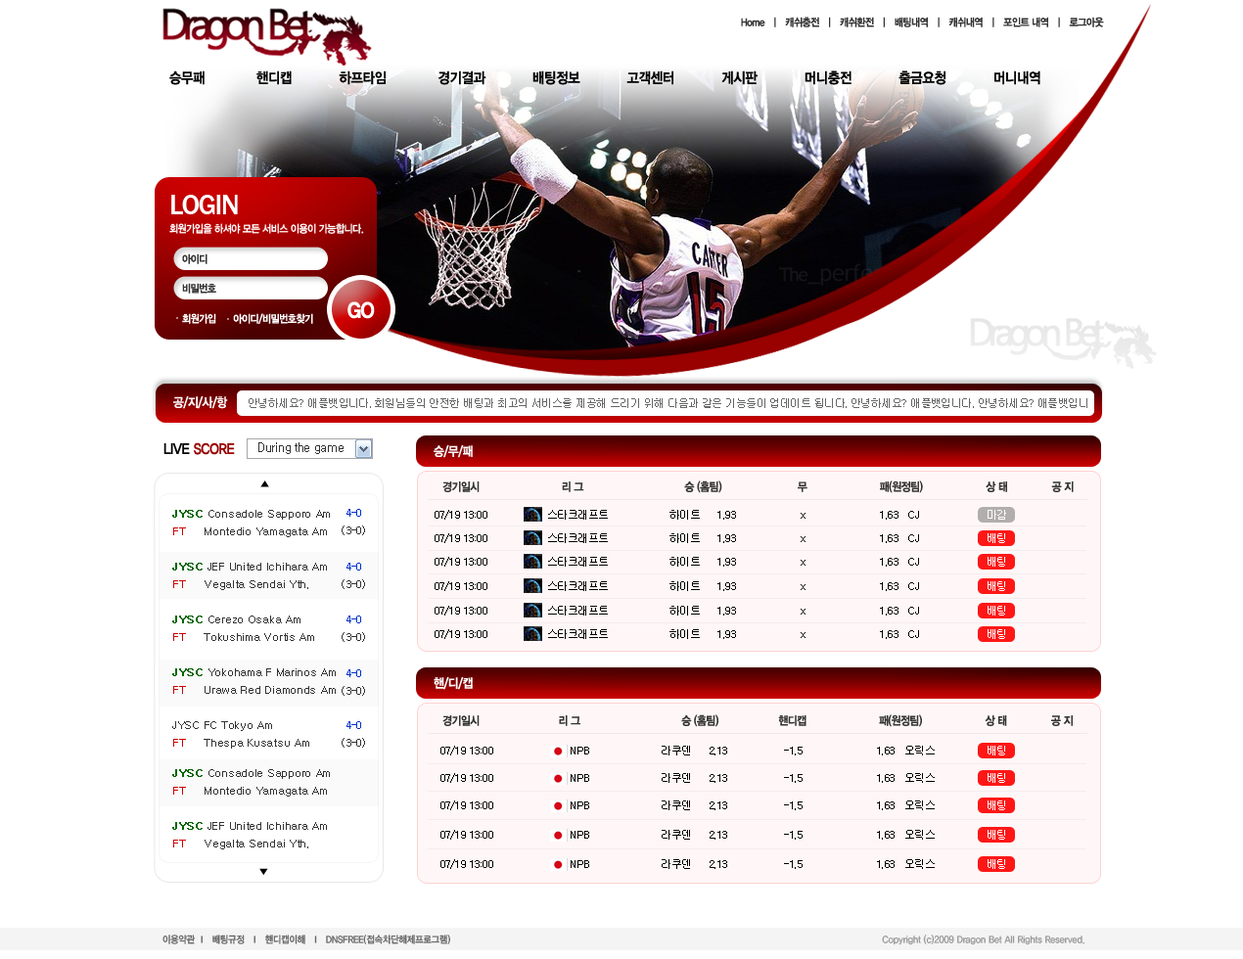
<style>
.page{position:relative;width:1243px;height:959px;background:#ffffff}
.page>*{position:absolute;margin:0}
.t1{font:10.8px "YDIYGO340";letter-spacing:-0.05em;color:#333333;scale:0.9 1}
.t2{font:14.7px "YDIYGO340";letter-spacing:-0.025em;color:#000000;scale:0.9 1}
.t3{font:28.2px "FranklinGothic-Medium";letter-spacing:-0.05em;color:#ffffff}
.t4{font:10.8px "YDIYGO340";letter-spacing:-0.05em;color:#ffffff;scale:0.9 1}
.t5{font:10.8px/29.4px "YDIYGO340";letter-spacing:-0.05em;color:#333333;scale:0.9 1}
.t6{font:21px "YDIYGO360";letter-spacing:-0.05em;color:#ffffff;scale:0.9 1}
.t7{font:12.7px "YDIYGO340";letter-spacing:-0.05em;color:#ffffff;scale:0.9 1}
.t8{font:10.8px "Gulim";letter-spacing:-0.05em;color:#666666}
.t9{font:14.7px "YDIYGO340";letter-spacing:-0.025em;color:#990000;scale:0.9 1}
.t10{font:11.7px "Gulim";letter-spacing:-0.025em;color:#333333}
.t11{font:11.7px "YDIYGO340";letter-spacing:-0.05em;color:#333333;scale:0.9 1}
.t12{font:10.8px/17.6px "Gulim";letter-spacing:-0.025em;color:#333333}
.t13{font:10.8px/17.6px "Gulim";letter-spacing:-0.025em;color:#006600;font-weight:bold}
.t14{font:10.8px/17.6px "Gulim";letter-spacing:-0.025em;color:#cc0000}
.t15{font:10.8px/17.6px "Gulim";letter-spacing:-0.025em;color:#0033cc}
.t16{font:10.8px "Gulim";letter-spacing:-0.05em;color:#000000}
.t17{font:10.8px "Gulim";letter-spacing:-0.05em;color:#ffffff}
.t18{font:9.8px "YDIYGO330";color:#666666;scale:0.9 1}
.t19{font:9.8px "YDIYGO330";color:#999999;scale:0.9 1}
</style>
<div class="page">
<p class="t1" style="left:741px;top:17px;width:363px;height:10px">Home  ㅣ  캐쉬충전  ㅣ  캐쉬환전  ㅣ  배팅내역  ㅣ  캐쉬내역  ㅣ  포인트 내역  ㅣ  로그아웃</p>
<p class="t2" style="left:169px;top:70px;width:871px;height:15px">승무패            핸디캡           하프타임            경기결과           배팅정보           고객센터           게시판           머니충전           출금요청           머니내역</p>
<p class="t3" style="left:171px;top:195px;width:67px;height:19px">LOGIN</p>
<p class="t4" style="left:169px;top:223px;width:195px;height:11px">회원가입을 하셔야 모든 서비스 이용이 가능합니다.</p>
<p class="t5" style="left:182px;top:254px;width:34px;height:40px">아이디<br>비밀번호</p>
<p class="t6" style="left:347px;top:301px;width:28px;height:18px">GO</p>
<p class="t4" style="left:182px;top:313px;width:131px;height:11px">회원가입      아이디/비밀번호찾기</p>
<p class="t7" style="left:173px;top:396px;width:55px;height:13px">공/지/사/항</p>
<p class="t8" style="left:249px;top:398px;width:838px;height:10px">안녕하세요? 애플뱃입니다. 회원님들의 안전한 배팅과 최고의 서비스를 제공해 드리기 위해 다음과 같은 기능들이 업데이트 됩니다. 안녕하세요? 애플뱃입니다. 안녕하세요? 애플뱃입니</p>
<p class="t9" style="left:163px;top:442px;width:72px;height:13px"><span class="t2">LIVE </span>SCORE</p>
<p class="t10" style="left:258px;top:442px;width:86px;height:12px">During the game</p>
<p class="t7" style="left:434px;top:445px;width:39px;height:13px">승/무/패</p>
<p class="t11" style="left:442px;top:481px;width:632px;height:12px">경기일시                          리 그                                승 (홈팀)                        무                       패(원정팀)                    상 태              공 지</p>
<p class="t12" style="left:172px;top:510px;width:164px;height:239px"><span class="t13">JYSC</span> Consadole Sapporo Am  <br><span class="t14">FT</span>     Montedio Yamagata Am <br><br><span class="t13">JYSC</span> JEF United Ichihara Am <br><span class="t14">FT</span>     Vegalta Sendai Yth. <br><br><span class="t13">JYSC</span> Cerezo Osaka Am <br><span class="t14">FT</span>     Tokushima Vortis Am <br><br><span class="t13">JYSC</span> Yokohama F Marinos Am<br><span class="t14">FT</span>     Urawa Red Diamonds Am <br><br>JYSC FC Tokyo Am <br><span class="t14">FT</span>     Thespa Kusatsu Am</p>
<p class="t12" style="left:342px;top:509px;width:23px;height:26px;text-align:center"><span class="t15">4-0<br></span>(3-0)</p>
<p class="t16" style="left:435px;top:510px;width:484px;height:10px">07/19 13:00                  스타크래프트                  하이트     1.93                   x                      1.63   CJ</p>
<p class="t17" style="left:988px;top:510px;width:18px;height:10px">마감</p>
<p class="t16" style="left:435px;top:533px;width:484px;height:10px">07/19 13:00                  스타크래프트                  하이트     1.93                   x                      1.63   CJ</p>
<p class="t17" style="left:988px;top:533px;width:17px;height:10px">배팅</p>
<p class="t16" style="left:435px;top:557px;width:484px;height:10px">07/19 13:00                  스타크래프트                  하이트     1.93                   x                      1.63   CJ</p>
<p class="t17" style="left:988px;top:557px;width:17px;height:10px">배팅</p>
<p class="t12" style="left:342px;top:563px;width:23px;height:26px;text-align:center"><span class="t15">4-0<br></span>(3-0)</p>
<p class="t16" style="left:435px;top:581px;width:484px;height:10px">07/19 13:00                  스타크래프트                  하이트     1.93                   x                      1.63   CJ</p>
<p class="t17" style="left:988px;top:581px;width:17px;height:10px">배팅</p>
<p class="t16" style="left:435px;top:606px;width:484px;height:10px">07/19 13:00                  스타크래프트                  하이트     1.93                   x                      1.63   CJ</p>
<p class="t17" style="left:988px;top:606px;width:17px;height:10px">배팅</p>
<p class="t12" style="left:342px;top:616px;width:23px;height:26px;text-align:center"><span class="t15">4-0<br></span>(3-0)</p>
<p class="t16" style="left:435px;top:629px;width:484px;height:10px">07/19 13:00                  스타크래프트                  하이트     1.93                   x                      1.63   CJ</p>
<p class="t17" style="left:988px;top:629px;width:17px;height:10px">배팅</p>
<p class="t12" style="left:342px;top:670px;width:23px;height:26px;text-align:center"><span class="t15">4-0<br></span>(3-0)</p>
<p class="t7" style="left:434px;top:677px;width:39px;height:13px">핸/디/캡</p>
<p class="t12" style="left:342px;top:721px;width:23px;height:27px;text-align:center"><span class="t15">4-0<br></span>(3-0)</p>
<p class="t11" style="left:442px;top:715px;width:631px;height:12px">경기일시                         리 그                                승 (홈팀)                   핸디캡                       패(원정팀)                    상 태              공 지</p>
<p class="t16" style="left:440px;top:746px;width:495px;height:10px">07/19 13:00                       NPB                     라쿠덴     2.13                 -1.5                      1.63   오릭스</p>
<p class="t17" style="left:988px;top:746px;width:17px;height:10px">배팅</p>
<p class="t12" style="left:172px;top:769px;width:158px;height:81px"><span class="t13">JYSC</span> Consadole Sapporo Am  <br><span class="t14">FT</span>     Montedio Yamagata Am <br><br><span class="t13">JYSC</span> JEF United Ichihara Am <br><span class="t14">FT</span>     Vegalta Sendai Yth.</p>
<p class="t16" style="left:440px;top:773px;width:495px;height:10px">07/19 13:00                       NPB                     라쿠덴     2.13                 -1.5                      1.63   오릭스</p>
<p class="t17" style="left:988px;top:773px;width:17px;height:10px">배팅</p>
<p class="t16" style="left:440px;top:801px;width:495px;height:9px">07/19 13:00                       NPB                     라쿠덴     2.13                 -1.5                      1.63   오릭스</p>
<p class="t17" style="left:988px;top:801px;width:17px;height:9px">배팅</p>
<p class="t16" style="left:440px;top:830px;width:495px;height:10px">07/19 13:00                       NPB                     라쿠덴     2.13                 -1.5                      1.63   오릭스</p>
<p class="t17" style="left:988px;top:830px;width:17px;height:10px">배팅</p>
<p class="t16" style="left:440px;top:859px;width:495px;height:10px">07/19 13:00                       NPB                     라쿠덴     2.13                 -1.5                      1.63   오릭스</p>
<p class="t17" style="left:988px;top:859px;width:17px;height:10px">배팅</p>
<p class="t18" style="left:162px;top:935px;width:288px;height:10px">이용약관  l   배팅규정   l   핸디캡이해   l   DNSFREE(접속차단해제프로그램)</p>
<p class="t19" style="left:882px;top:935px;width:203px;height:11px">Copyright (c)2009 Dragon Bet All Rights Reserved.</p>
</div>
